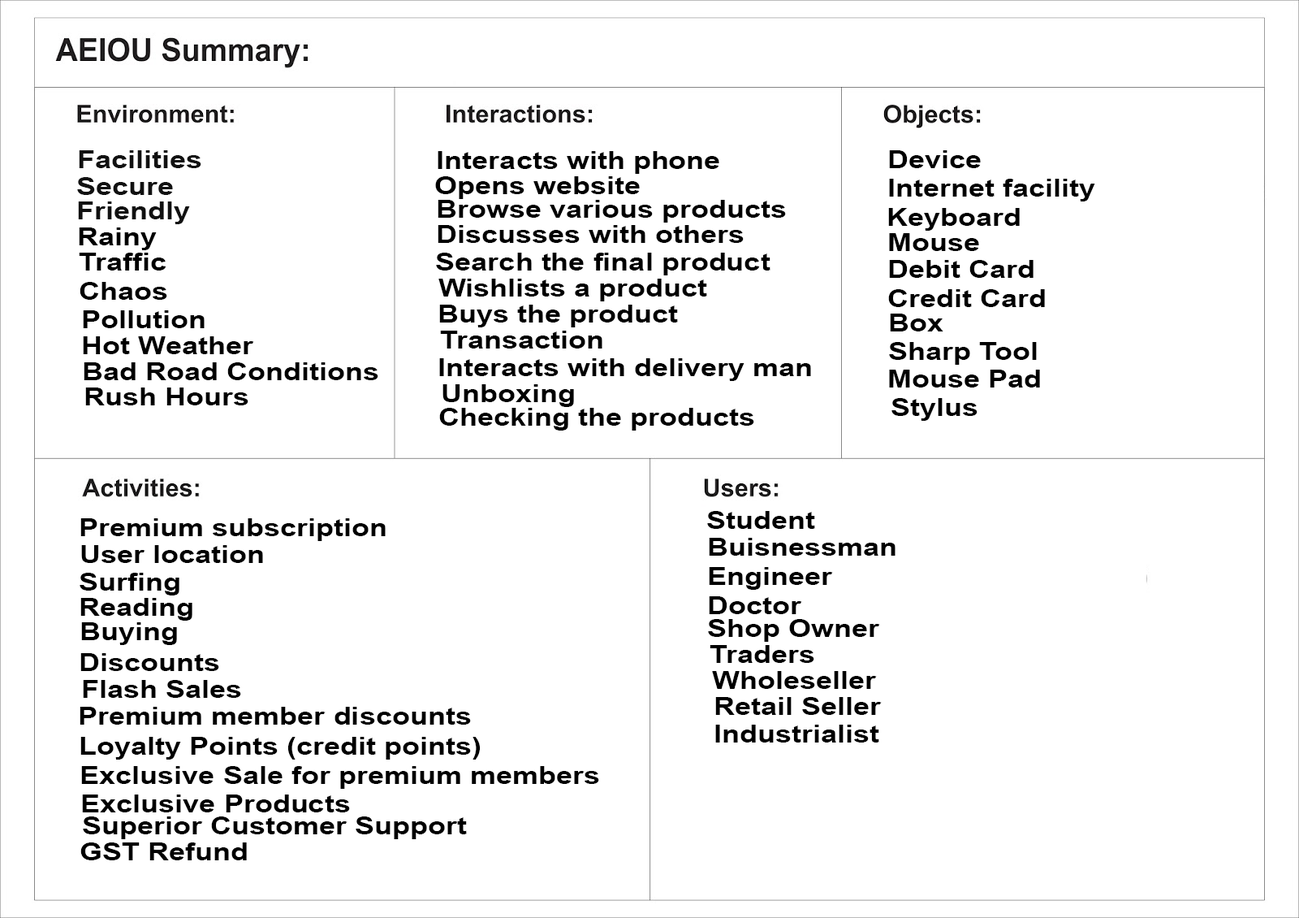
<style>
.page{position:relative;width:1299px;height:918px;background:#ffffff}
.page>*{position:absolute;margin:0}
.t1{font:24.4px "Arial-BoldMT";color:#111111;scale:1.2 1}
.t2{font:24.4px "Arial-BoldMT";color:#000000;scale:1.2 1}
</style>
<div class="page">
<p class="t1" style="left:79px;top:150px;width:122px;height:18px">Facilities</p>
<p class="t2" style="left:438px;top:151px;width:282px;height:23px">Interacts with phone</p>
<p class="t2" style="left:889px;top:150px;width:92px;height:18px">Device</p>
<p class="t1" style="left:77px;top:177px;width:96px;height:18px">Secure</p>
<p class="t2" style="left:435px;top:176px;width:205px;height:23px">Opens website</p>
<p class="t2" style="left:889px;top:179px;width:207px;height:22px">Internet facility</p>
<p class="t1" style="left:78px;top:201px;width:112px;height:23px">Friendly</p>
<p class="t2" style="left:438px;top:200px;width:348px;height:23px">Browse various products</p>
<p class="t2" style="left:888px;top:208px;width:132px;height:23px">Keyboard</p>
<p class="t2" style="left:79px;top:227px;width:78px;height:23px">Rainy</p>
<p class="t2" style="left:438px;top:225px;width:306px;height:18px">Discusses with others</p>
<p class="t2" style="left:889px;top:233px;width:90px;height:18px">Mouse</p>
<p class="t2" style="left:79px;top:253px;width:88px;height:47px">Traffic<br>Chaos</p>
<p class="t2" style="left:436px;top:253px;width:335px;height:22px">Search the final product</p>
<p class="t2" style="left:888px;top:260px;width:157px;height:47px">Debit Card<br>Credit Card</p>
<p class="t2" style="left:439px;top:279px;width:268px;height:22px">Wishlists a product</p>
<p class="t2" style="left:439px;top:305px;width:239px;height:22px">Buys the product</p>
<p class="t2" style="left:83px;top:310px;width:122px;height:18px">Pollution</p>
<p class="t2" style="left:890px;top:313px;width:54px;height:18px">Box</p>
<p class="t2" style="left:83px;top:336px;width:171px;height:18px">Hot Weather</p>
<p class="t2" style="left:440px;top:331px;width:163px;height:17px">Transaction</p>
<p class="t2" style="left:889px;top:342px;width:148px;height:23px">Sharp Tool</p>
<p class="t2" style="left:84px;top:362px;width:294px;height:18px">Bad Road Conditions</p>
<p class="t2" style="left:439px;top:358px;width:372px;height:23px">Interacts with delivery man</p>
<p class="t2" style="left:889px;top:370px;width:151px;height:17px">Mouse Pad</p>
<p class="t2" style="left:85px;top:387px;width:164px;height:18px">Rush Hours</p>
<p class="t2" style="left:443px;top:384px;width:131px;height:23px">Unboxing</p>
<p class="t2" style="left:892px;top:398px;width:86px;height:23px">Stylus</p>
<p class="t2" style="left:439px;top:408px;width:315px;height:22px">Checking the products</p>
<p class="t2" style="left:80px;top:518px;width:306px;height:23px">Premium subscription</p>
<p class="t2" style="left:707px;top:511px;width:108px;height:18px">Student</p>
<p class="t2" style="left:81px;top:545px;width:182px;height:18px">User location</p>
<p class="t2" style="left:709px;top:538px;width:187px;height:76px">Buisnessman<br>Engineer<br>Doctor</p>
<p class="t2" style="left:80px;top:573px;width:99px;height:22px">Surfing</p>
<p class="t2" style="left:80px;top:598px;width:112px;height:22px">Reading</p>
<p class="t2" style="left:81px;top:622px;width:96px;height:23px">Buying</p>
<p class="t2" style="left:708px;top:619px;width:172px;height:23px">Shop Owner</p>
<p class="t2" style="left:80px;top:653px;width:139px;height:18px">Discounts</p>
<p class="t2" style="left:710px;top:645px;width:105px;height:18px">Traders</p>
<p class="t2" style="left:712px;top:671px;width:165px;height:18px">Wholeseller</p>
<p class="t2" style="left:83px;top:680px;width:158px;height:18px">Flash Sales</p>
<p class="t2" style="left:715px;top:697px;width:167px;height:18px">Retail Seller</p>
<p class="t2" style="left:80px;top:707px;width:391px;height:17px">Premium member discounts</p>
<p class="t2" style="left:715px;top:724px;width:165px;height:18px">Industrialist</p>
<p class="t2" style="left:80px;top:737px;width:401px;height:22px">Loyalty Points (credit points)</p>
<p class="t2" style="left:81px;top:766px;width:518px;height:23px">Exclusive Sale for premium members</p>
<p class="t2" style="left:82px;top:794px;width:268px;height:18px">Exclusive Products</p>
<p class="t2" style="left:83px;top:816px;width:384px;height:23px">Superior Customer Support</p>
<p class="t2" style="left:80px;top:842px;width:167px;height:18px">GST Refund</p>
</div>
